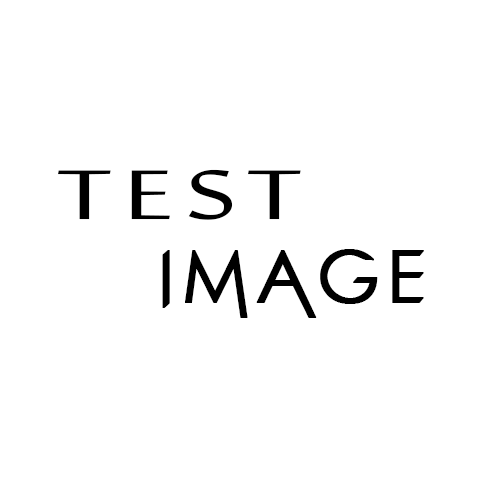
<style>
.page{position:relative;width:500px;height:500px;background:#ffffff}
.page>*{position:absolute;margin:0}
.t1{font:96.5px "SakkalMajalla";letter-spacing:0.08em;color:#000000;scale:1.45 1}
.t2{font:72px "RezaZulmiSans";letter-spacing:0.08em;color:#000000;font-weight:bold}
</style>
<div class="page">
<p class="t1" style="left:58px;top:169px;width:243px;height:51px">TEST</p>
<p class="t2" style="left:162px;top:249px;width:262px;height:69px">IMAGE</p>
</div>
